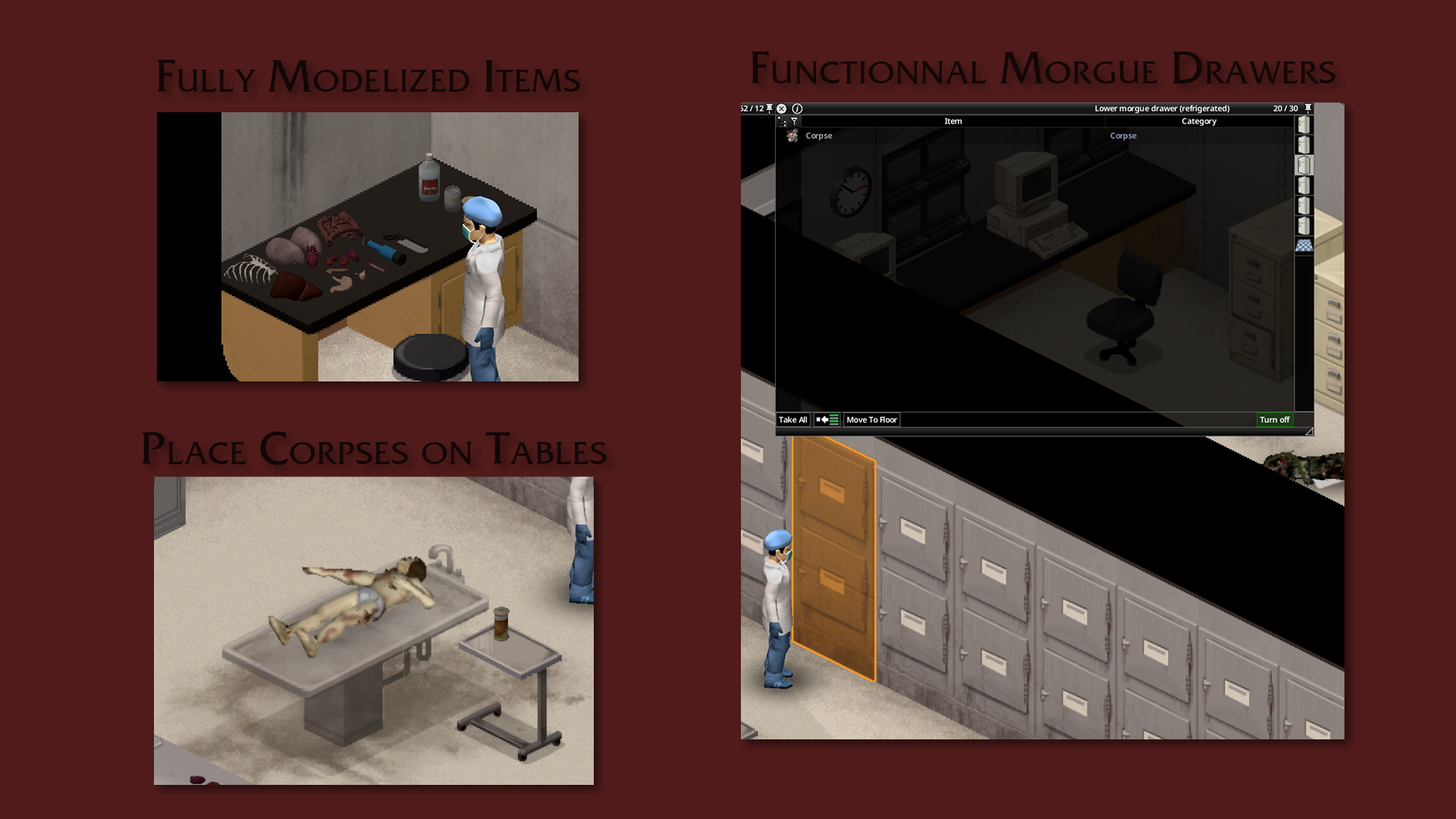
<style>
.page{position:relative;width:1456px;height:819px;background:#511b1b}
.page>*{position:absolute;margin:0}
.t1{font:45.5px "FrizQua-ReguOS";color:#130606;font-variant:small-caps}
</style>
<div class="page">
<p class="t1" style="left:751px;top:52px;width:584px;height:33px">Functionnal Morgue Drawers</p>
<p class="t1" style="left:157px;top:60px;width:423px;height:33px">Fully Modelized Items</p>
<p class="t1" style="left:142px;top:431px;width:465px;height:35px">Place Corpses on Tables</p>
</div>
